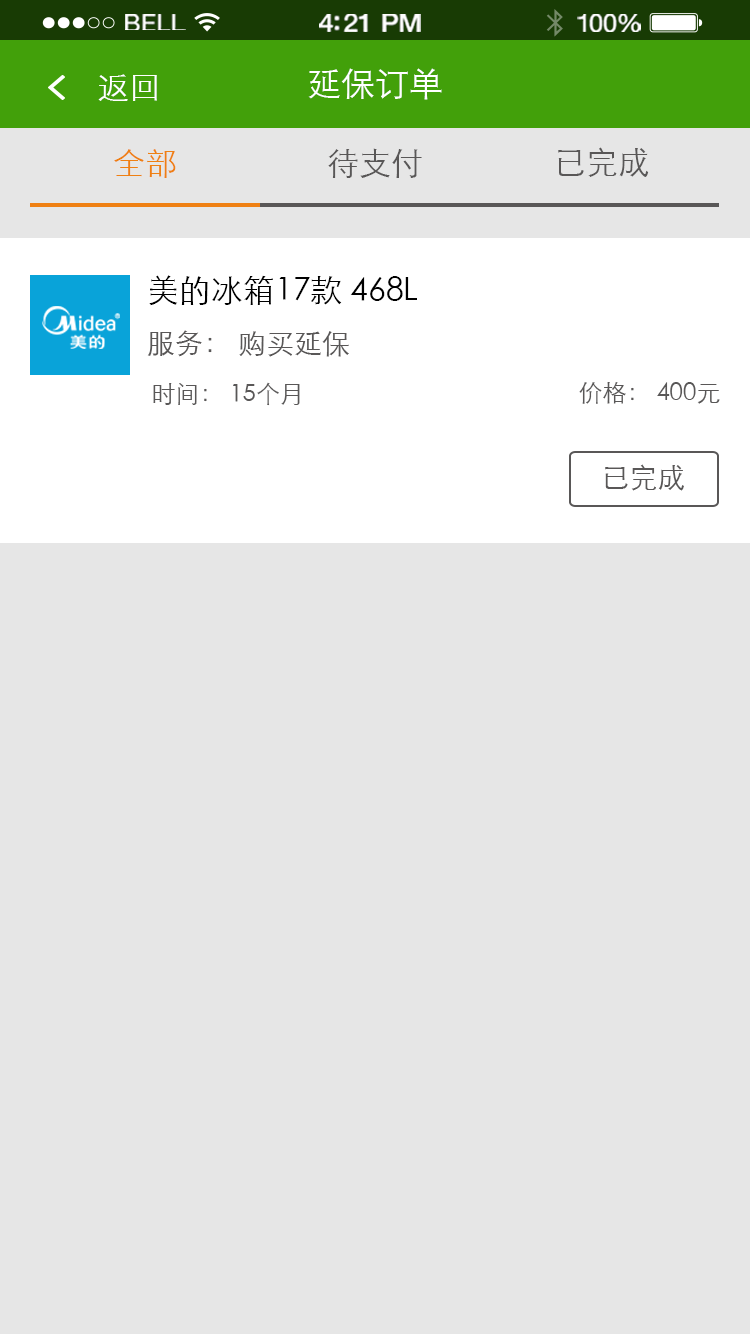
<style>
.page{position:relative;width:750px;height:1334px;background:#e6e6e6}
.page>*{position:absolute;margin:0}
.t1{font:23.3px "HelveticaNeue";letter-spacing:0.02em;color:#ffffff;scale:1.06 1}
.t2{font:25.3px "HelveticaNeue-Medium";letter-spacing:-0.02em;color:#ffffff;scale:1.06 1}
.t3{font:24.3px "HelveticaNeue";letter-spacing:-0.02em;color:#ffffff;scale:1.06 1}
.t4{font:32px "STXihei";color:#ffffff}
.t5{font:34px "STXihei";color:#ffffff}
.t6{font:32px "STXihei";color:#ef8013}
.t7{font:32px "STXihei";color:#595757}
.t8{font:32px/56px "STXihei";color:#000000}
.t9{font:28px/56px "STXihei";color:#595757}
.t10{font:24px "STXihei";color:#595757}
.t11{font:28px "STXihei";color:#595757}
</style>
<div class="page">
<p class="t1" style="left:125px;top:14px;width:61px;height:16px">BELL</p>
<p class="t2" style="left:319px;top:14px;width:102px;height:18px">4:21 PM</p>
<p class="t3" style="left:577px;top:14px;width:64px;height:18px">100%</p>
<p class="t4" style="left:98px;top:74px;width:59px;height:27px">返回</p>
<p class="t5" style="left:308px;top:68px;width:134px;height:32px">延保订单</p>
<p class="t6" style="left:114px;top:149px;width:62px;height:29px">全部</p>
<p class="t7" style="left:328px;top:148px;width:94px;height:30px">待支付</p>
<p class="t7" style="left:558px;top:147px;width:91px;height:30px">已完成</p>
<p class="t8" style="left:147px;top:275px;width:270px;height:82px">美的冰箱17款 468L <br><span class="t9">服务： 购买延保</span></p>
<p class="t10" style="left:153px;top:382px;width:147px;height:24px">时间： 15个月</p>
<p class="t10" style="left:579px;top:382px;width:141px;height:22px">价格： 400元</p>
<p class="t11" style="left:605px;top:464px;width:79px;height:27px">已完成</p>
</div>
